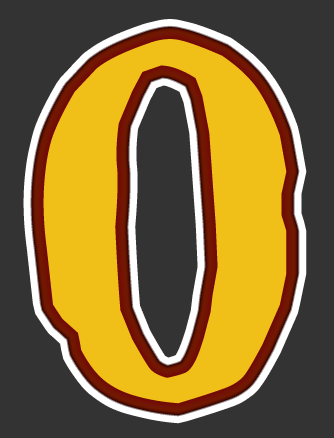
<style>
.page{position:relative;width:334px;height:438px;background:#333333}
.page>*{position:absolute;margin:0}
.t1{font:550px "PiecesofEight";letter-spacing:0.18em;color:#f0c018}
</style>
<div class="page">
<p class="t1" style="left:43px;top:39px;width:244px;height:365px">0</p>
</div>
